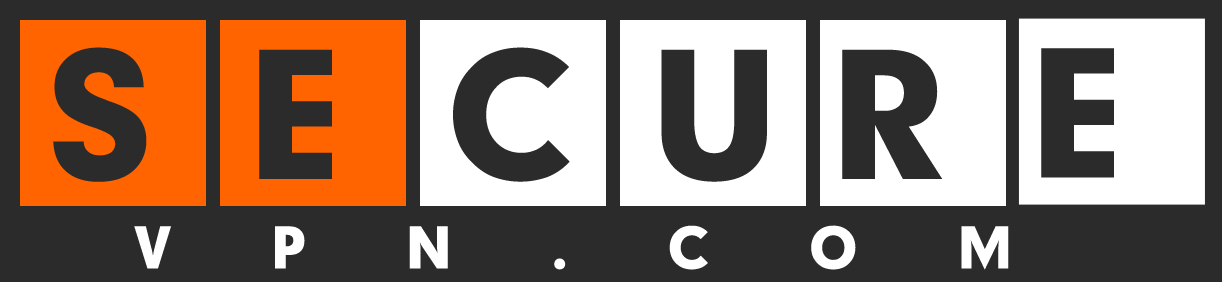
<style>
.page{position:relative;width:1222px;height:282px;background:#2b2b2b}
.page>*{position:absolute;margin:0}
.t1{font:169px "GeometrixBlack";letter-spacing:-0.04em;color:#2b2b2b}
.t2{font:55px "GeometrixBlack";letter-spacing:1.8em;color:#ffffff}
</style>
<div class="page">
<p class="t1" style="left:53px;top:47px;width:94px;height:135px">S</p>
<p class="t1" style="left:259px;top:49px;width:73px;height:130px">E</p>
<p class="t1" style="left:453px;top:47px;width:117px;height:135px">C</p>
<p class="t1" style="left:661px;top:49px;width:106px;height:133px">U</p>
<p class="t1" style="left:842px;top:49px;width:101px;height:130px">R</p>
<p class="t1" style="left:1041px;top:48px;width:73px;height:130px">E</p>
<p class="t2" style="left:134px;top:225px;width:875px;height:45px">VPN.COM</p>
</div>
